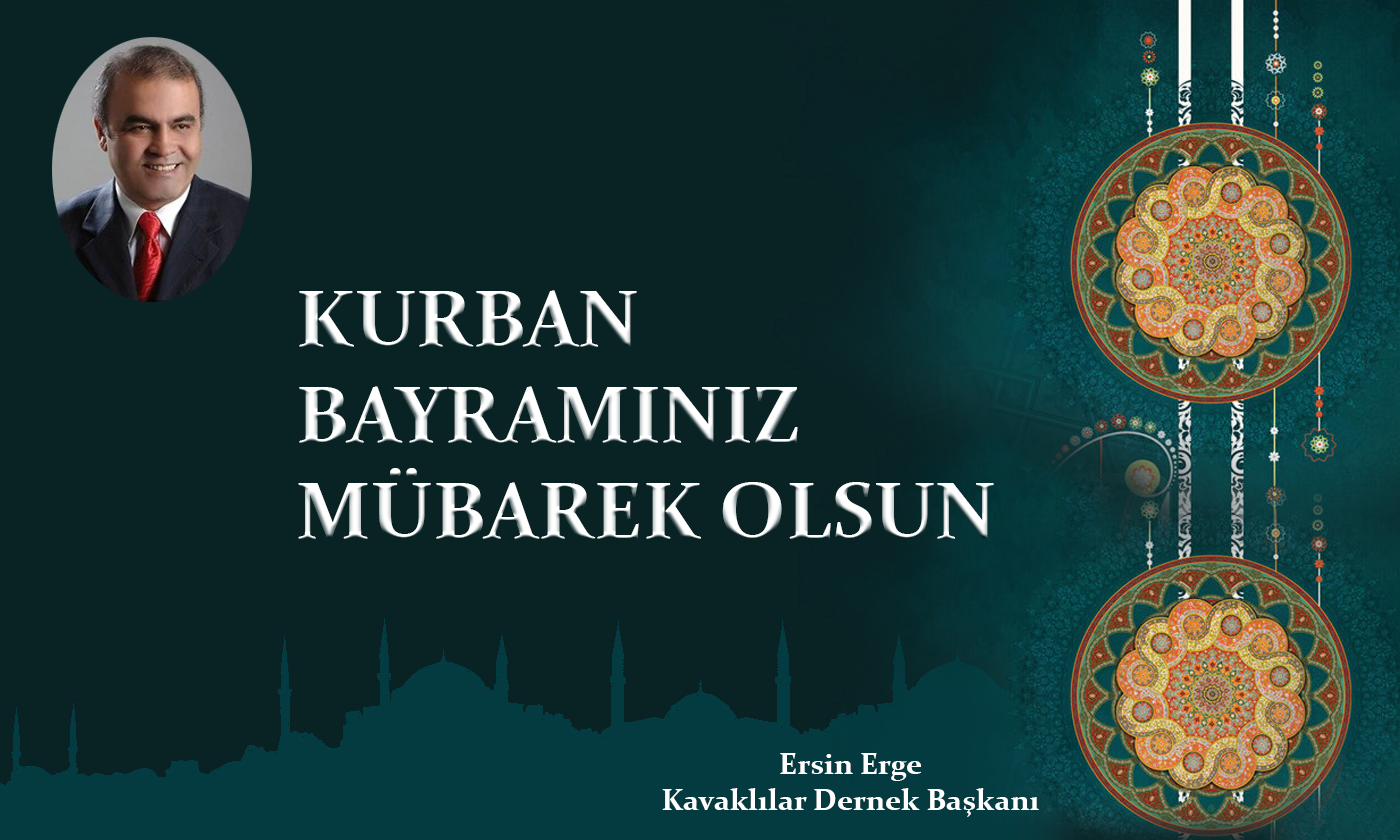
<style>
.page{position:relative;width:1400px;height:840px;background:#092324}
.page>*{position:absolute;margin:0}
.t1{font:80px "Constantia-Bold"}
.t2{font:30px "Constantia-Bold";color:#ffffff}
</style>
<div class="page">
<p class="t1" style="left:298px;top:290px;width:696px;height:250px">KURBAN<br>BAYRAMINIZ<br>MÜBAREK OLSUN</p>
<p class="t2" style="left:662px;top:753px;width:377px;height:64px;text-align:center">Ersin Erge<br>Kavaklılar Dernek Başkanı</p>
</div>
